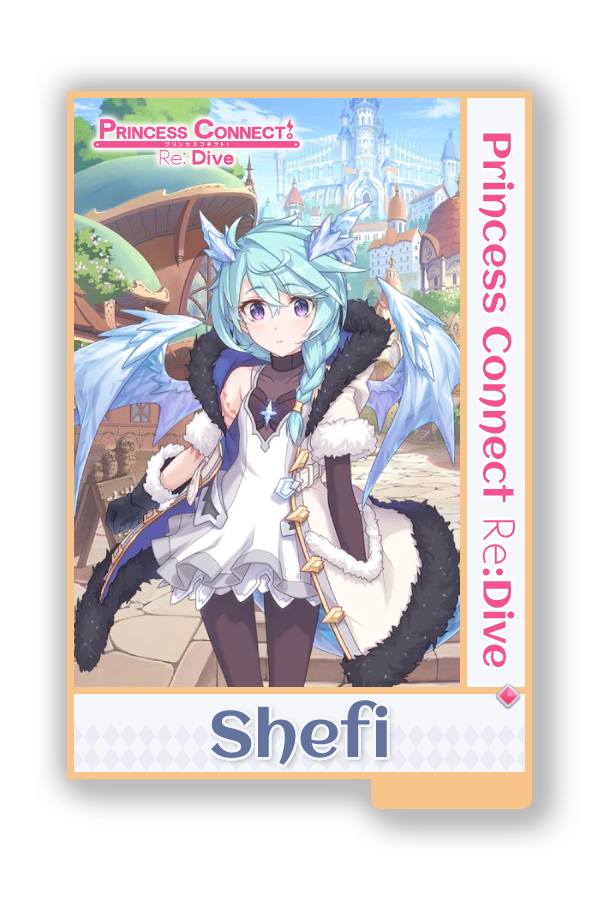
<style>
.page{position:relative;width:600px;height:900px;background:#ffffff}
.page>*{position:absolute;margin:0}
.t1{font:39px "Aclonica-Regular";color:#f55191}
.t2{font:39px "AaarghNormal";color:#f55191}
.t3{font:65px "Aclonica-Regular";color:#64739d}
</style>
<div class="page">
<p class="t1" style="left:478px;top:133px;width:38px;height:534px;rotate:90deg">Princess Connect <span class="t2">Re</span>:Dive</p>
<p class="t3" style="left:211px;top:700px;width:177px;height:65px">Shefi</p>
</div>
